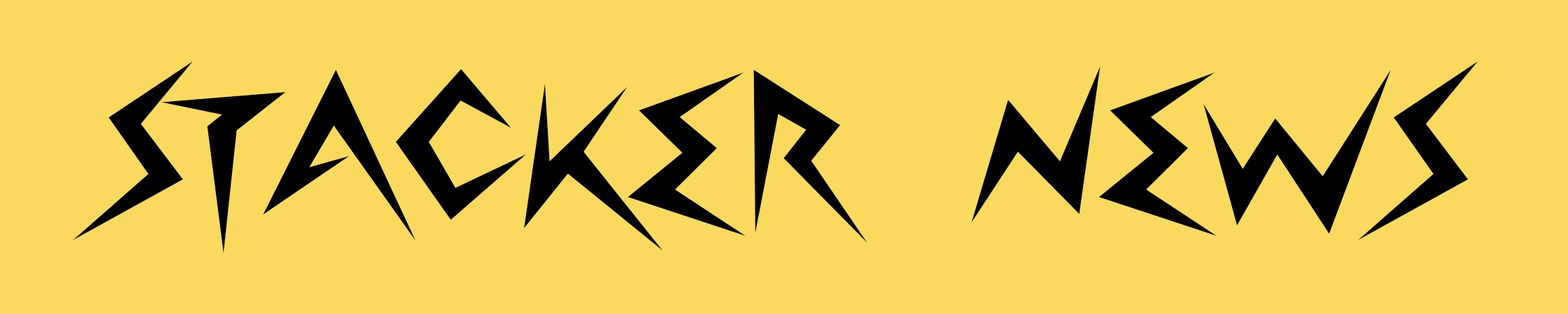
<style>
.page{position:relative;width:1568px;height:314px;background:#fada5e}
.page>*{position:absolute;margin:0}
.t1{font:257.9px "Lightningvolt";color:#000000}
</style>
<div class="page">
<p class="t1" style="left:72px;top:61px;width:1406px;height:192px">STACKER NEWS</p>
</div>
